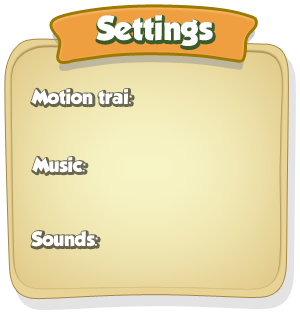
<style>
.page{position:relative;width:300px;height:315px}
.page>*{position:absolute;margin:0}
.t1{font:30px "GROBOLD";color:#ffffff}
.t2{font:18px "GROBOLD";color:#ffffff}
</style>
<div class="page">
<p class="t1" style="left:96px;top:15px;width:117px;height:31px">Settings</p>
<p class="t2" style="left:31px;top:88px;width:101px;height:18px">Motion trai:</p>
<p class="t2" style="left:32px;top:156px;width:54px;height:18px">Music:</p>
<p class="t2" style="left:31px;top:231px;width:67px;height:16px">Sounds:</p>
</div>
